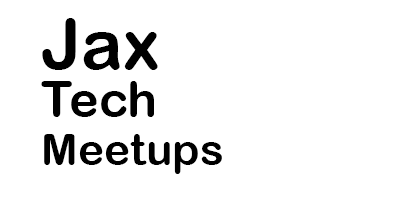
<style>
.page{position:relative;width:396px;height:216px;background:#ffffff}
.page>*{position:absolute;margin:0}
.t1{font:44px/48px "ArialRoundedMTBold";color:#000000}
.t2{font:70px/48px "ArialRoundedMTBold";color:#000000}
.t3{font:50px/48px "ArialRoundedMTBold";color:#000000}
</style>
<div class="page">
<p class="t1" style="left:41px;top:18px;width:181px;height:156px"><span class="t2">Jax<br></span><span class="t3">Tech<br></span>Meetups</p>
</div>
